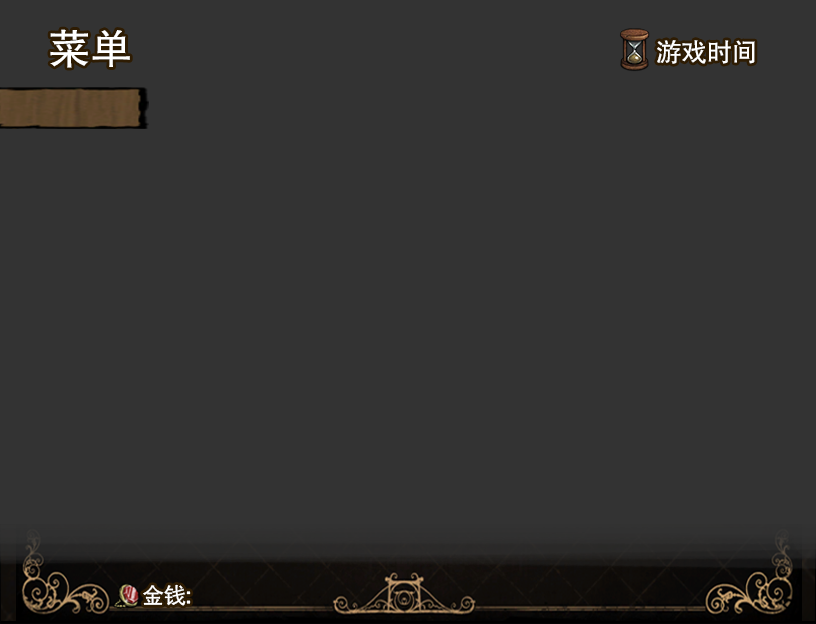
<style>
.page{position:relative;width:816px;height:624px;background:#333333}
.page>*{position:absolute;margin:0}
.t1{font:41px "FZHTJW--GB1-0";letter-spacing:-0.025em;color:#ffffff;scale:1.04 1}
.t2{font:25.7px "FZHTJW--GB1-0";letter-spacing:-0.025em;color:#ffffff}
.t3{font:22.2px "FZHTJW--GB1-0";letter-spacing:-0.025em;color:#ffffff}
</style>
<div class="page">
<p class="t1" style="left:50px;top:29px;width:80px;height:39px">菜单</p>
<p class="t2" style="left:657px;top:40px;width:98px;height:24px">游戏时间</p>
<p class="t3" style="left:143px;top:584px;width:48px;height:22px">金钱:</p>
</div>
